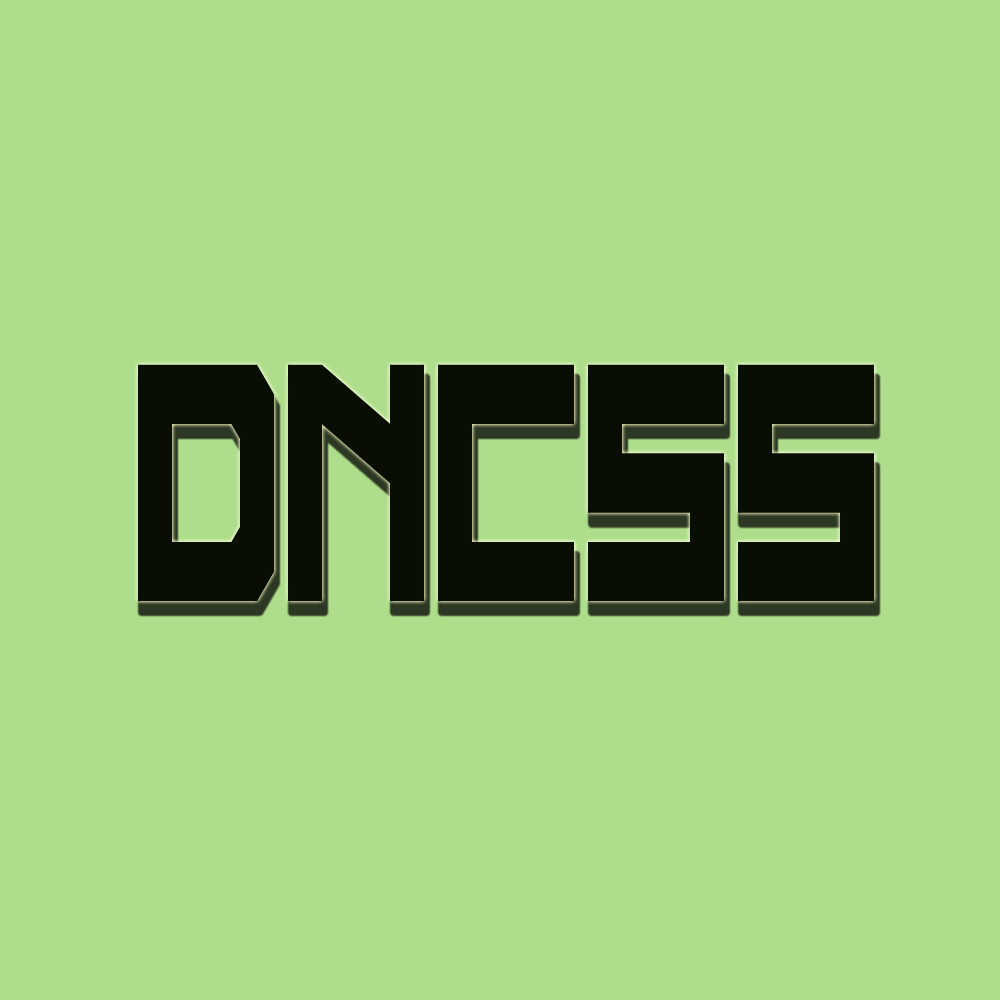
<style>
.page{position:relative;width:1000px;height:1000px;background:#aede8b}
.page>*{position:absolute;margin:0}
.t1{font:235.9px "Pointless";color:#080e04;scale:0.58 1}
</style>
<div class="page">
<p class="t1" style="left:138px;top:364px;width:736px;height:237px">DNCSS</p>
</div>
